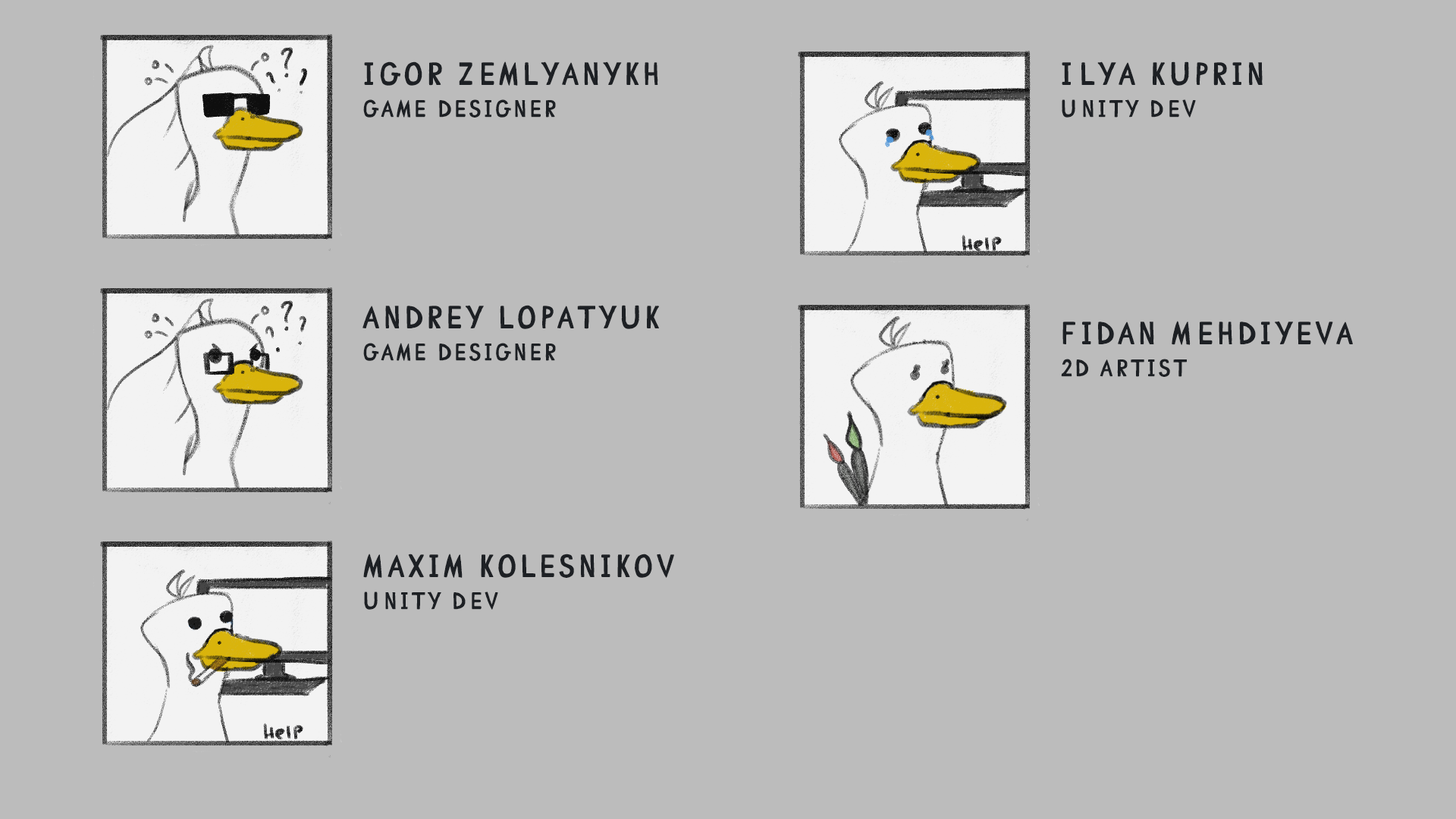
<style>
.page{position:relative;width:1456px;height:819px;background:#bcbcbc}
.page>*{position:absolute;margin:0}
.t1{font:32.1px/32.1px "ComicCAT";letter-spacing:0.075em;color:#1d2024}
.t2{font:24.1px/32.1px "ComicCAT";letter-spacing:0.075em;color:#1d2024}
</style>
<div class="page">
<p class="t1" style="left:363px;top:61px;width:295px;height:57px">Igor Zemlyanykh<br><span class="t2">game designer</span></p>
<p class="t1" style="left:1062px;top:61px;width:201px;height:57px">Ilya Kuprin<br><span class="t2">Unity Dev</span></p>
<p class="t1" style="left:362px;top:305px;width:297px;height:56px">Andrey Lopatyuk<br><span class="t2">game designer</span></p>
<p class="t1" style="left:1061px;top:321px;width:292px;height:56px">Fidan Mehdiyeva<br><span class="t2">2D Artist</span></p>
<p class="t1" style="left:363px;top:554px;width:311px;height:56px">Maxim Kolesnikov<br><span class="t2">Unity Dev</span></p>
</div>
